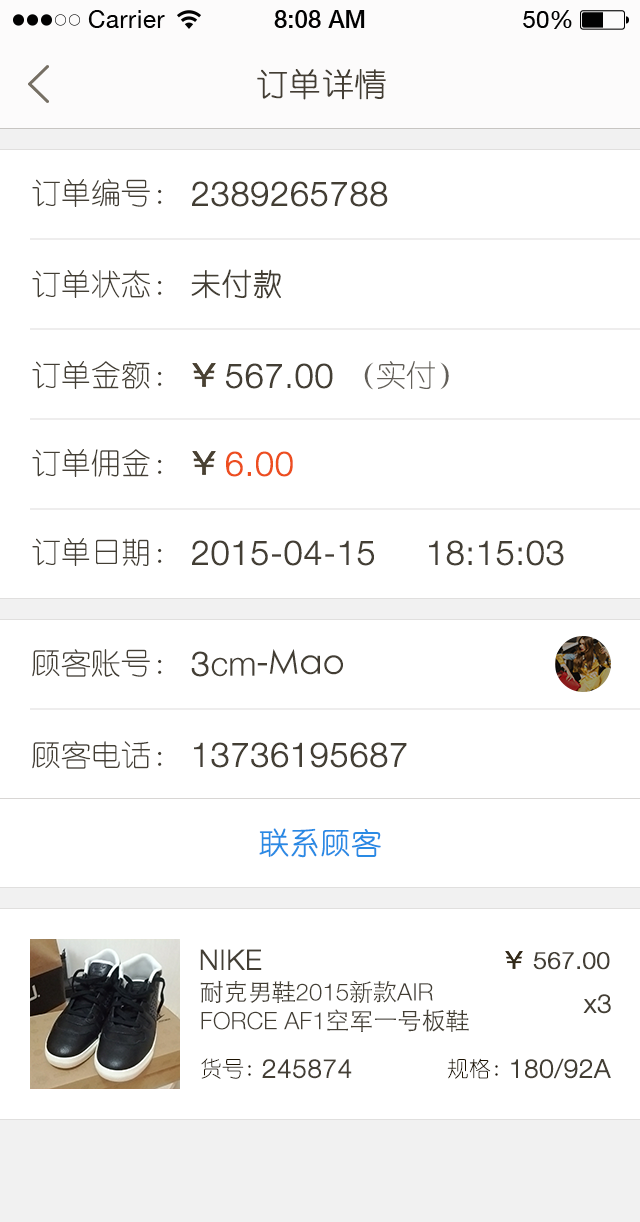
<style>
.page{position:relative;width:640px;height:1222px;background:#ffffff}
.page>*{position:absolute;margin:0}
.t1{font:32px "YouYuan";color:#433d33;text-transform:uppercase;font-weight:bold}
.t2{font:30px "YouYuan";color:#433e34;text-transform:uppercase}
.t3{font:34px "HelveticaNeueLTPro-Lt";color:#433e34;text-transform:uppercase;font-weight:bold}
.t4{font:30px "YouYuan";color:#433e34;text-transform:uppercase;font-weight:bold}
.t5{font:30px "YouYuan";color:#625e58;text-transform:uppercase}
.t6{font:34px "HelveticaNeueLTPro-Lt";color:#ed4e1f;text-transform:uppercase;font-weight:bold}
.t7{font:34px "STHeitiSC-Light";color:#433e34}
.t8{font:34px "HelveticaNeueLTPro-Lt";color:#433e34}
.t9{font:30px "YouYuan";color:#298ae4;text-transform:uppercase;font-weight:bold}
.t10{font:28px "HelveticaNeueLTPro-Lt";color:#433e34;text-transform:uppercase;font-weight:bold}
.t11{font:24px "HelveticaNeueLTPro-Lt";color:#433e34;text-transform:uppercase;font-weight:bold}
.t12{font:24px "HelveticaNeueLTPro-Lt";color:#433e34;text-transform:uppercase}
.t13{font:24px "STHeitiSC-Light";color:#433e34;text-transform:uppercase}
.t14{font:26px "HelveticaNeueLTPro-Lt";color:#433e34;font-weight:bold}
.t15{font:22px "YouYuan";color:#1b1100;text-transform:uppercase}
.t16{font:26px "HelveticaNeueLTPro-Lt";color:#433e34;text-transform:uppercase;font-weight:bold}
</style>
<div class="page">
<p class="t1" style="left:257px;top:69px;width:129px;height:31px">订单详情</p>
<p class="t2" style="left:32px;top:178px;width:130px;height:29px">订单编号：</p>
<p class="t3" style="left:192px;top:181px;width:196px;height:26px">2389265788</p>
<p class="t2" style="left:32px;top:270px;width:130px;height:28px">订单状态：</p>
<p class="t4" style="left:191px;top:269px;width:90px;height:30px">未付款</p>
<p class="t2" style="left:32px;top:361px;width:130px;height:28px">订单金额：</p>
<p class="t3" style="left:226px;top:363px;width:107px;height:26px">567.00</p>
<p class="t5" style="left:364px;top:361px;width:85px;height:29px">（实付）</p>
<p class="t2" style="left:32px;top:449px;width:130px;height:28px">订单佣金：</p>
<p class="t6" style="left:226px;top:451px;width:67px;height:26px">6.00</p>
<p class="t2" style="left:32px;top:538px;width:130px;height:28px">订单日期：</p>
<p class="t3" style="left:192px;top:540px;width:182px;height:26px">2015-04-15</p>
<p class="t3" style="left:429px;top:540px;width:135px;height:26px">18:15:03</p>
<p class="t2" style="left:32px;top:649px;width:130px;height:28px">顾客账号：</p>
<p class="t7" style="left:191px;top:649px;width:152px;height:28px"><span class="t3">3</span><span class="t8">cm</span>-Mao</p>
<p class="t2" style="left:32px;top:741px;width:130px;height:28px">顾客电话：</p>
<p class="t3" style="left:194px;top:742px;width:213px;height:26px">13736195687</p>
<p class="t9" style="left:259px;top:828px;width:122px;height:30px">联系顾客</p>
<p class="t10" style="left:200px;top:949px;width:62px;height:21px">NIKE</p>
<p class="t11" style="left:533px;top:952px;width:77px;height:18px">567.00</p>
<p class="t12" style="left:200px;top:980px;width:269px;height:52px"><span class="t13">耐克男鞋</span>2015<span class="t13">新款</span>air force AF1<span class="t13">空军一号板鞋</span></p>
<p class="t14" style="left:583px;top:994px;width:28px;height:20px">x3</p>
<p class="t15" style="left:201px;top:1058px;width:50px;height:21px">货号:</p>
<p class="t16" style="left:262px;top:1059px;width:90px;height:20px">245874</p>
<p class="t15" style="left:447px;top:1058px;width:51px;height:21px">规格:</p>
<p class="t16" style="left:511px;top:1058px;width:100px;height:21px">180/92a</p>
</div>
